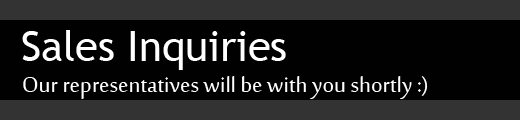
<style>
.page{position:relative;width:520px;height:120px;background:#010101}
.page>*{position:absolute;margin:0}
.t1{font:41.7px "TrebuchetMS";color:#ffffff}
.t2{font:29.2px "SakkalMajalla";color:#fffefe}
</style>
<div class="page">
<p class="t1" style="left:22px;top:30px;width:264px;height:40px">Sales Inquiries</p>
<p class="t2" style="left:23px;top:76px;width:405px;height:23px">Our representatives will be with you shortly :)</p>
</div>
